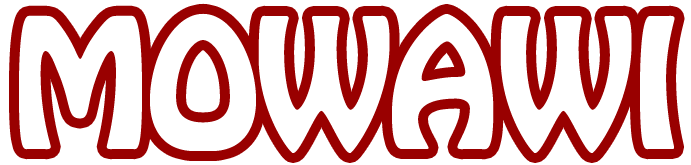
<style>
.page{position:relative;width:691px;height:165px;background:#ffffff}
.page>*{position:absolute;margin:0}
.t1{font:160px "HoboStd";letter-spacing:-0.025em;color:#ffffff}
</style>
<div class="page">
<p class="t1" style="left:19px;top:13px;width:656px;height:140px">MOWAWI</p>
</div>
